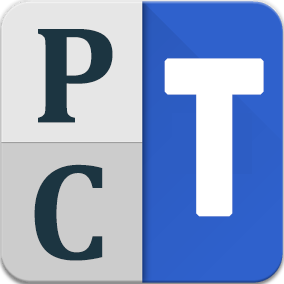
<style>
.page{position:relative;width:284px;height:284px}
.page>*{position:absolute;margin:0}
.t1{font:140px "Cambria-Bold";color:#1c3541}
.t2{font:228px "FranklinGothic-Demi";color:#ffffff;font-weight:bold;scale:0.83 1}
</style>
<div class="page">
<p class="t1" style="left:38px;top:29px;width:75px;height:94px">P</p>
<p class="t2" style="left:164px;top:58px;width:100px;height:159px">T</p>
<p class="t1" style="left:34px;top:164px;width:69px;height:97px">C</p>
</div>
